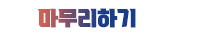
<style>
.page{position:relative;width:210px;height:35px;background:#ffffff}
.page>*{position:absolute;margin:0}
.t1{font:20px "VITRO-CORE-TTF";letter-spacing:-0.025em;font-weight:bold}
</style>
<div class="page">
<p class="t1" style="left:38px;top:8px;width:98px;height:20px">마무리하기</p>
</div>
